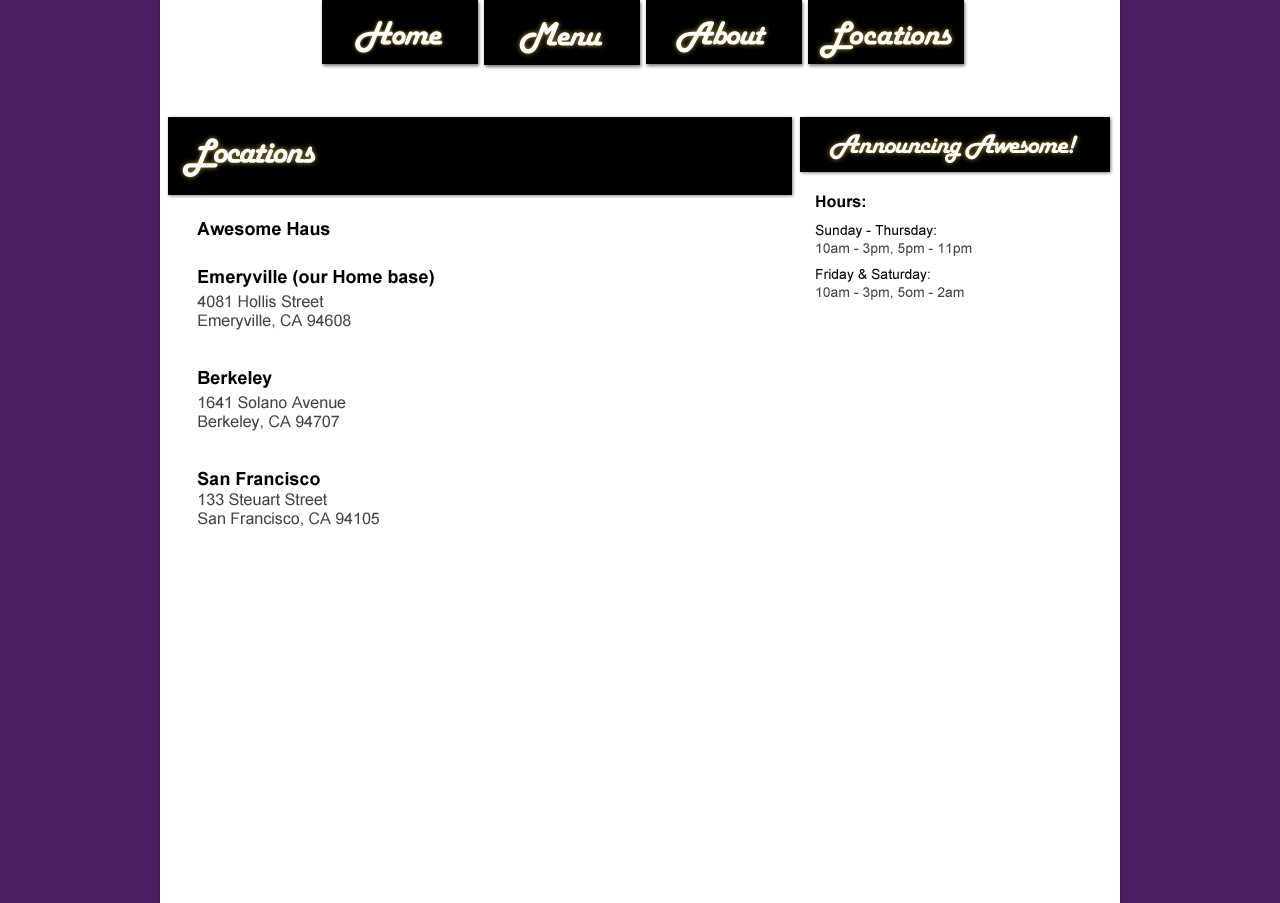
<style>
.page{position:relative;width:1280px;height:903px;background:#ffffff}
.page>*{position:absolute;margin:0}
.t1{font:35px "HarlowSolid";letter-spacing:-0.04em;color:#ffffff}
.t2{font:28px "HarlowSolid";letter-spacing:-0.04em;color:#ffffff}
.t3{font:36.4px "HarlowSolid";letter-spacing:-0.04em;color:#ffffff}
.t4{font:14px/18px "ArialMT";color:#444444}
.t5{font:16px/18px "Arial-BoldMT";color:#010000}
.t6{font:14px/18px "ArialMT";color:#000000}
.t7{font:16px "ArialMT";color:#444444}
.t8{font:18px/18px "Arial-BoldMT";color:#000000}
</style>
<div class="page">
<p class="t1" style="left:355px;top:21px;width:88px;height:32px">Home</p>
<p class="t1" style="left:519px;top:22px;width:84px;height:32px">Menu</p>
<p class="t1" style="left:676px;top:21px;width:91px;height:32px">About</p>
<p class="t1" style="left:819px;top:21px;width:133px;height:38px">Locations</p>
<p class="t2" style="left:829px;top:134px;width:249px;height:29px">Announcing Awesome!</p>
<p class="t3" style="left:182px;top:138px;width:134px;height:39px">Locations</p>
<p class="t4" style="left:815px;top:195px;width:157px;height:105px"><span class="t5">Hours:<br></span><span class="t6">Sunday - Thursday: <br></span>10am - 3pm, 5pm - 11pm<br><span class="t6">Friday &amp; Saturday: <br></span>10am - 3pm, 5om - 2am</p>
<p class="t7" style="left:197px;top:222px;width:237px;height:305px"><span class="t8">Awesome Haus<br>Emeryville (our Home base)<br></span>4081 Hollis Street<br>Emeryville, CA 94608 <br><span class="t8">Berkeley</span><br>1641 Solano Avenue<br>Berkeley, CA 94707<br><span class="t8">San Francisco<br></span>133 Steuart Street<br>San Francisco, CA 94105</p>
</div>
